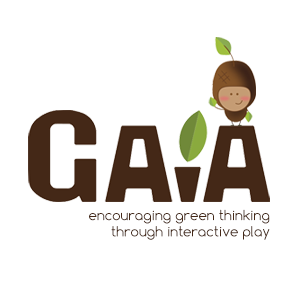
<style>
.page{position:relative;width:300px;height:298px;background:#ffffff}
.page>*{position:absolute;margin:0}
.t1{font:13.5px "Comfortaa";color:#442817}
</style>
<div class="page">
<p class="t1" style="left:89px;top:209px;width:181px;height:31px;text-align:right">encouraging green thinking<br>through interactive play</p>
</div>
